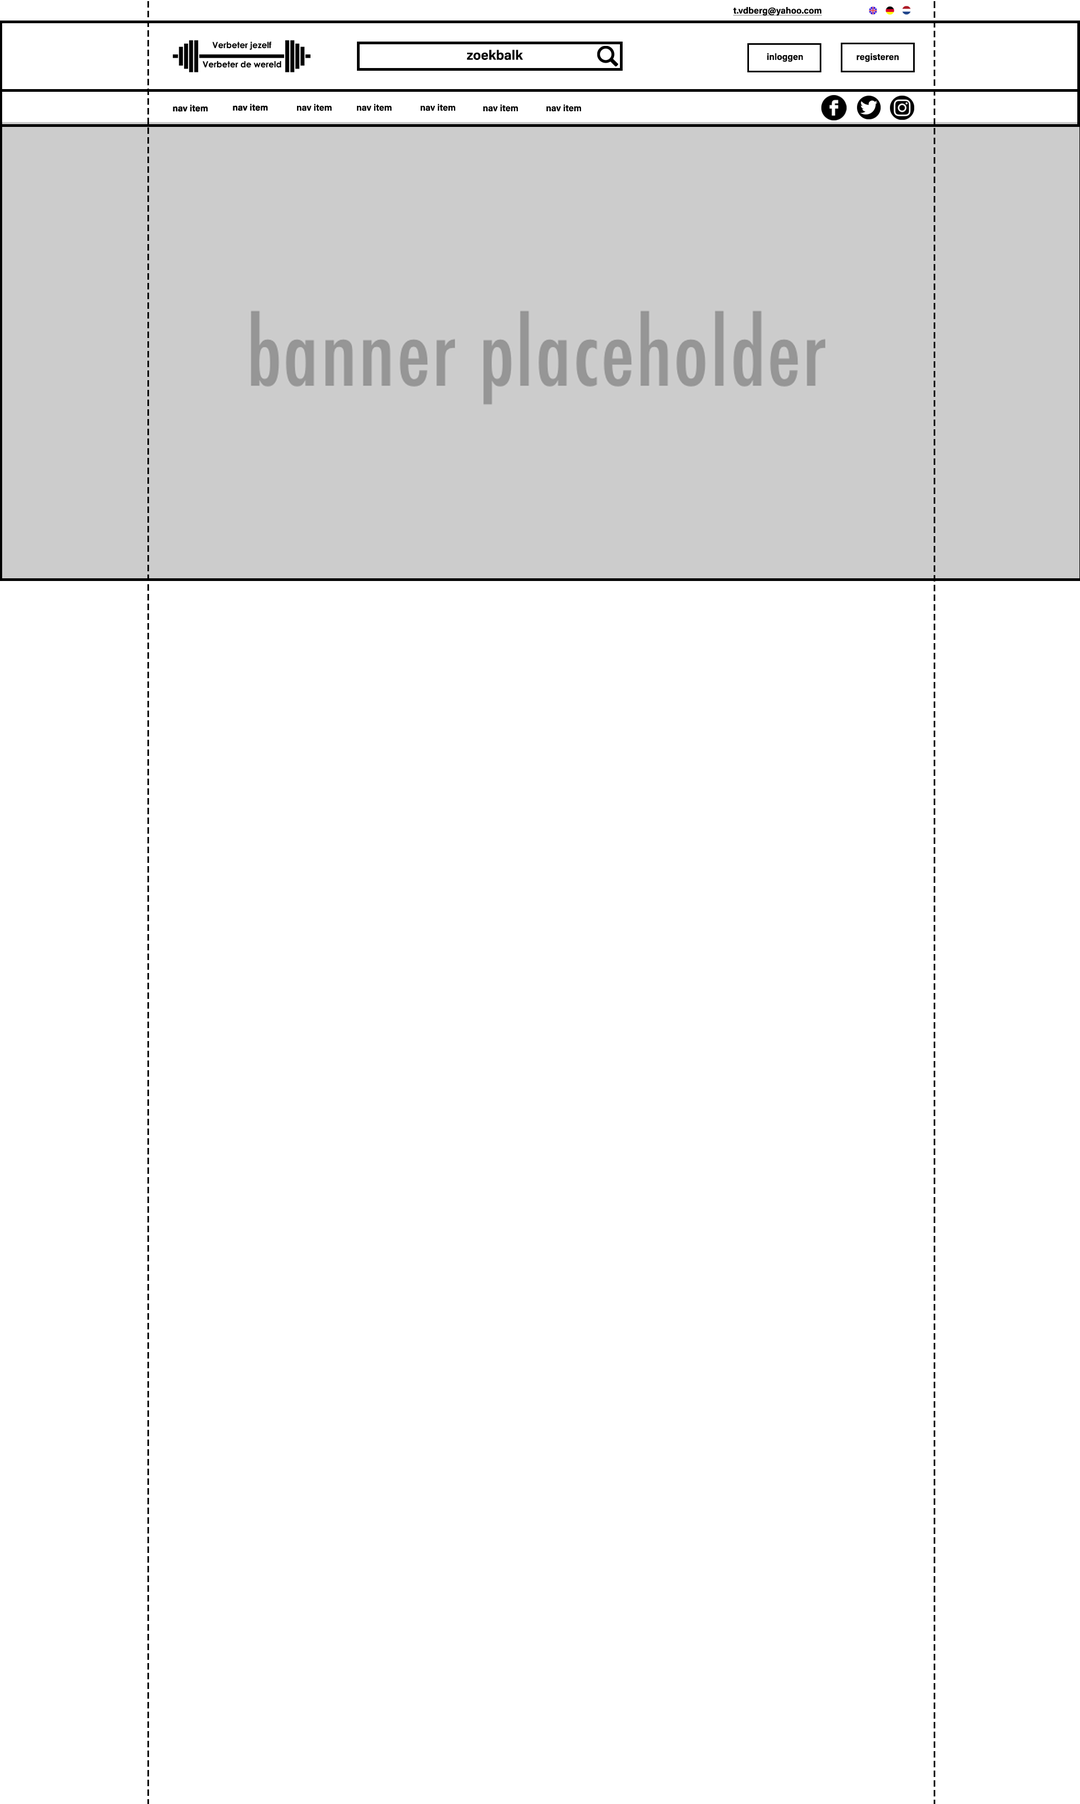
<style>
.page{position:relative;width:1080px;height:1804px;background:#ffffff}
.page>*{position:absolute;margin:0}
.t1{font:9px "AcuminConcept-Bold";color:#000000;text-decoration:underline}
.t2{font:13.5px "AcuminConcept-Bold";color:#000000}
.t3{font:9px "AcuminConcept-Bold";color:#000000}
</style>
<div class="page">
<p class="t1" style="left:733px;top:7px;width:89px;height:9px">t.vdberg@yahoo.com</p>
<p class="t2" style="left:467px;top:50px;width:56px;height:10px">zoekbalk</p>
<p class="t3" style="left:767px;top:53px;width:36px;height:9px">inloggen</p>
<p class="t3" style="left:856px;top:53px;width:43px;height:9px">registeren</p>
<p class="t3" style="left:297px;top:104px;width:35px;height:7px">nav item</p>
<p class="t3" style="left:357px;top:104px;width:34px;height:7px">nav item</p>
<p class="t3" style="left:421px;top:104px;width:34px;height:7px">nav item</p>
<p class="t3" style="left:483px;top:104px;width:35px;height:8px">nav item</p>
<p class="t3" style="left:546px;top:104px;width:35px;height:8px">nav item</p>
</div>
